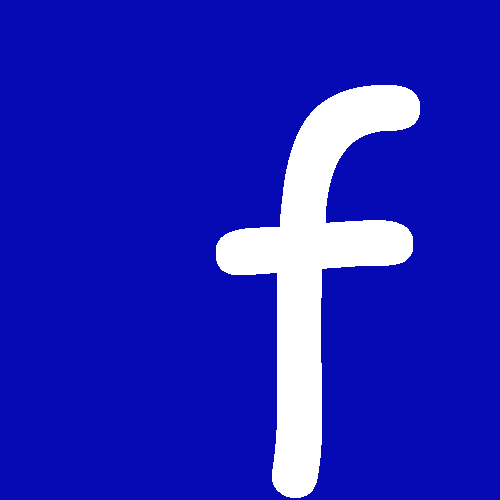
<style>
.page{position:relative;width:500px;height:500px;background:#060ab5}
.page>*{position:absolute;margin:0}
.t1{font:480px "ComicSansMS";color:#ffffff}
</style>
<div class="page">
<p class="t1" style="left:216px;top:85px;width:204px;height:413px">f</p>
</div>
